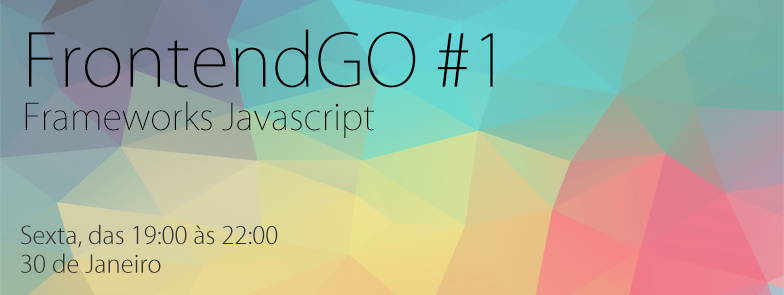
<style>
.page{position:relative;width:784px;height:295px}
.page>*{position:absolute;margin:0}
.t1{font:36px "KozGoPro-ExtraLight";color:#010101}
.t2{font:72px "KozGoPro-ExtraLight";color:#010101}
.t3{font:24px "KozGoPro-Light";color:#363636}
</style>
<div class="page">
<p class="t1" style="left:25px;top:29px;width:468px;height:109px"><span class="t2">FrontendGO #1<br></span>Frameworks Javascript</p>
<p class="t3" style="left:21px;top:224px;width:257px;height:49px">Sexta, das 19:00 às 22:00<br>30 de Janeiro</p>
</div>
